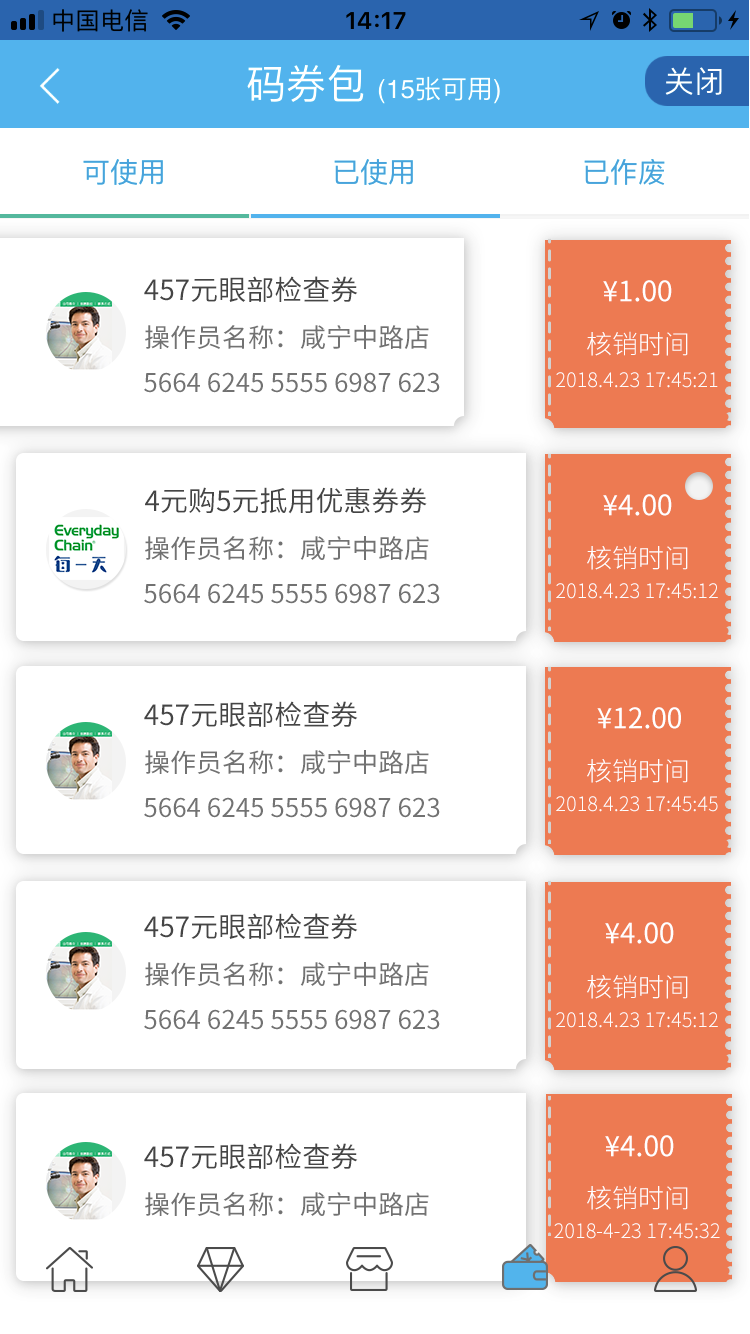
<style>
.page{position:relative;width:750px;height:1334px;background:#ffffff}
.page>*{position:absolute;margin:0}
.t1{font:28px "SourceHanSansCN-Regular";color:#454545}
.t2{font:28px "SourceHanSansCN-Regular";color:#ffffff}
.t3{font:26px "SourceHanSansCN-Regular";color:#727272}
.t4{font:26px "SourceHanSansCN-Light";color:#ffffff}
.t5{font:20px "SourceHanSansCN-Light";color:#fefefe}
</style>
<div class="page">
<p class="t1" style="left:144px;top:276px;width:214px;height:26px">457元眼部检查券</p>
<p class="t2" style="left:603px;top:280px;width:69px;height:22px">¥1.00</p>
<p class="t3" style="left:145px;top:325px;width:284px;height:24px">操作员名称：咸宁中路店</p>
<p class="t4" style="left:587px;top:331px;width:101px;height:25px">核销时间</p>
<p class="t3" style="left:144px;top:372px;width:296px;height:21px">5664 6245 5555 6987 623</p>
<p class="t5" style="left:556px;top:372px;width:162px;height:16px">2018.4.23 17:45:21</p>
<p class="t1" style="left:145px;top:487px;width:282px;height:27px">4元购5元抵用优惠券券</p>
<p class="t2" style="left:603px;top:494px;width:69px;height:22px">¥4.00</p>
<p class="t3" style="left:145px;top:536px;width:284px;height:24px">操作员名称：咸宁中路店</p>
<p class="t4" style="left:587px;top:545px;width:101px;height:25px">核销时间</p>
<p class="t3" style="left:144px;top:583px;width:296px;height:21px">5664 6245 5555 6987 623</p>
<p class="t5" style="left:556px;top:583px;width:162px;height:16px">2018.4.23 17:45:12</p>
<p class="t1" style="left:144px;top:701px;width:214px;height:26px">457元眼部检查券</p>
<p class="t2" style="left:597px;top:707px;width:84px;height:22px">¥12.00</p>
<p class="t3" style="left:145px;top:750px;width:284px;height:24px">操作员名称：咸宁中路店</p>
<p class="t4" style="left:587px;top:758px;width:101px;height:25px">核销时间</p>
<p class="t3" style="left:144px;top:797px;width:296px;height:21px">5664 6245 5555 6987 623</p>
<p class="t5" style="left:556px;top:796px;width:162px;height:16px">2018.4.23 17:45:45</p>
<p class="t1" style="left:144px;top:913px;width:214px;height:26px">457元眼部检查券</p>
<p class="t2" style="left:605px;top:922px;width:69px;height:22px">¥4.00</p>
<p class="t3" style="left:145px;top:962px;width:284px;height:24px">操作员名称：咸宁中路店</p>
<p class="t4" style="left:587px;top:974px;width:101px;height:25px">核销时间</p>
<p class="t3" style="left:144px;top:1009px;width:296px;height:21px">5664 6245 5555 6987 623</p>
<p class="t5" style="left:556px;top:1012px;width:162px;height:16px">2018.4.23 17:45:12</p>
<p class="t1" style="left:144px;top:1143px;width:214px;height:26px">457元眼部检查券</p>
<p class="t2" style="left:605px;top:1135px;width:69px;height:22px">¥4.00</p>
<p class="t3" style="left:145px;top:1192px;width:284px;height:24px">操作员名称：咸宁中路店</p>
<p class="t4" style="left:587px;top:1185px;width:101px;height:25px">核销时间</p>
<p class="t5" style="left:554px;top:1223px;width:166px;height:16px">2018-4-23 17:45:32</p>
</div>
